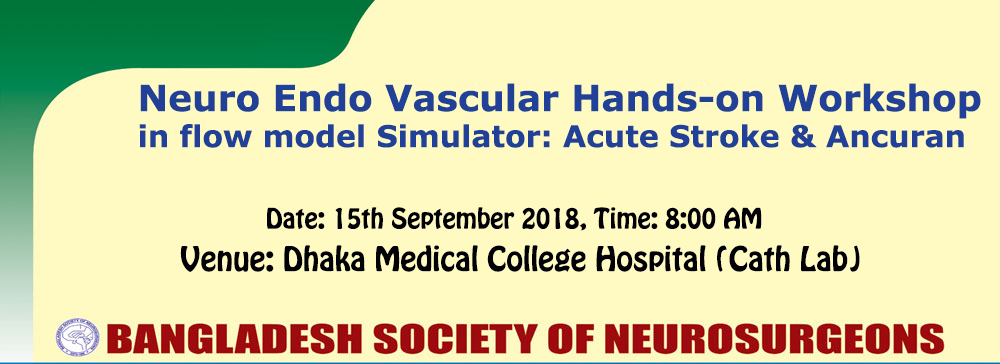
<style>
.page{position:relative;width:1000px;height:364px;background:#fffac2}
.page>*{position:absolute;margin:0}
.t1{font:30px/36px "Verdana-Bold";color:#214198}
.t2{font:36px/36px "Verdana-Bold";color:#214198}
.t3{font:25px "HoboStd";color:#000006}
.t4{font:30px "HoboStd";color:#000006}
</style>
<div class="page">
<p class="t1" style="left:139px;top:83px;width:842px;height:65px"><span class="t2">Neuro Endo Vascular Hands-on Workshop<br></span>in flow model Simulator: Acute Stroke &amp; Ancuran</p>
<p class="t3" style="left:267px;top:207px;width:495px;height:24px">Date: 15th September 2018, Time: 8:00 AM</p>
<p class="t4" style="left:180px;top:245px;width:680px;height:27px">Venue: Dhaka Medical College Hospital (Cath Lab)</p>
</div>
